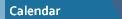
<style>
.page{position:relative;width:122px;height:19px;background:#1b709e}
.page>*{position:absolute;margin:0}
.t1{font:13px "Corbel-Bold";letter-spacing:0.01em;color:#ffffff}
</style>
<div class="page">
<p class="t1" style="left:10px;top:5px;width:51px;height:11px">Calendar</p>
</div>
